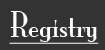
<style>
.page{position:relative;width:105px;height:50px;background:#333333}
.page>*{position:absolute;margin:0}
.t1{font:32px "MonaLisaSolidITCTT";color:#fefefe;text-decoration:underline}
</style>
<div class="page">
<p class="t1" style="left:9px;top:11px;width:90px;height:33px">Registry</p>
</div>
